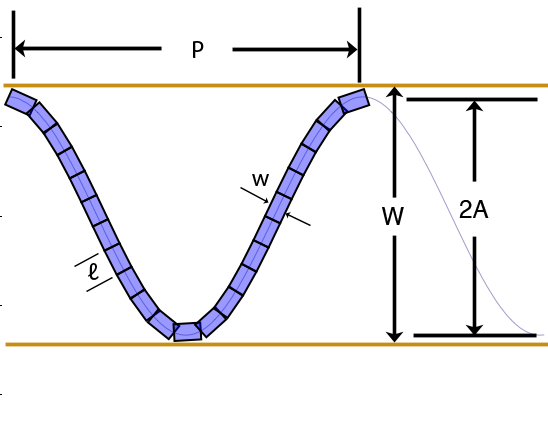
<style>
.page{position:relative;width:548px;height:440px;background:#ffffff}
.page>*{position:absolute;margin:0}
.t1{font:24px "MyriadPro-Regular";color:#000000}
.t2{font:24px "Helvetica";color:#000000}
</style>
<div class="page">
<p class="t1" style="left:193px;top:41px;width:11px;height:17px">P</p>
<p class="t1" style="left:252px;top:174px;width:17px;height:12px">w</p>
<p class="t2" style="left:382px;top:207px;width:22px;height:18px">W</p>
<p class="t2" style="left:459px;top:200px;width:30px;height:18px">2A</p>
<p class="t1" style="left:88px;top:263px;width:11px;height:17px">ℓ</p>
</div>
